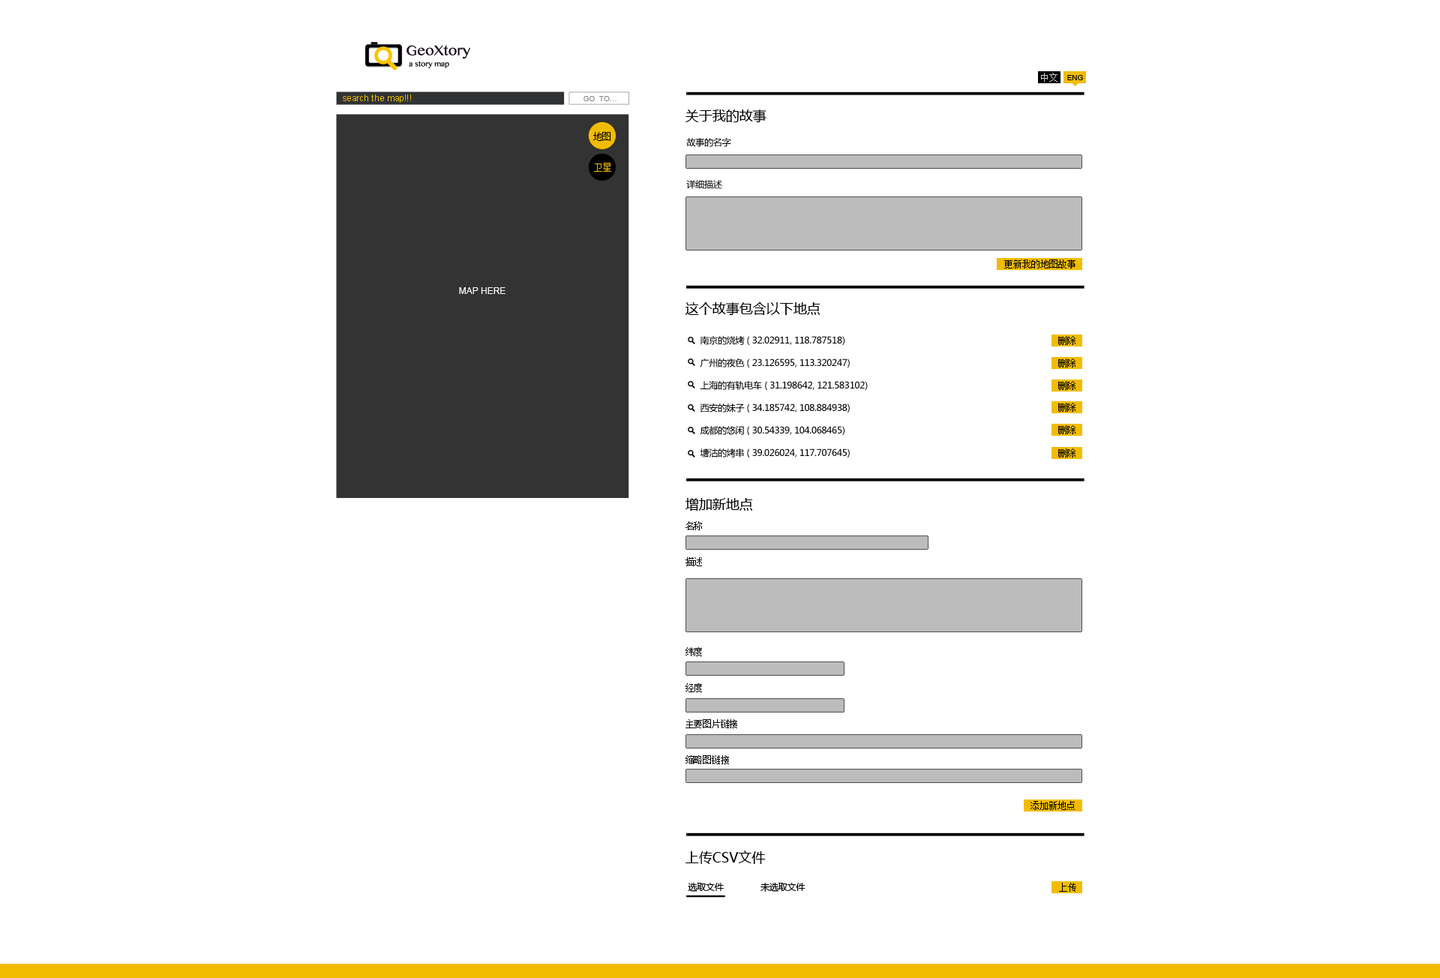
<style>
.page{position:relative;width:1440px;height:978px;background:#ffffff}
.page>*{position:absolute;margin:0}
.t1{font:19.9px "SinhalaMN";color:#190d1c}
.t2{font:10.3px "SinhalaMN";color:#190d1c}
.t3{font:9px "SimSun";color:#d0d0d0}
.t4{font:7.5px "ArialMT";color:#000000}
.t5{font:9px "ArialMT";color:#f2bc00}
.t6{font:7.5px "ArialMT";color:#8c868d;text-transform:uppercase}
.t7{font:13.5px "MicrosoftYaHei";color:#000000}
.t8{font:9px "SimSun";color:#000000}
.t9{font:9px/21px "MicrosoftYaHei";letter-spacing:-0.02em;color:#000000}
.t10{font:9px "SimSun";color:#f2bc00}
.t11{font:9px "ArialMT";color:#ffffff}
.t12{font:9px/22.5px "MicrosoftYaHei";letter-spacing:-0.02em;color:#000000}
.t13{font:9px/18px "SimSun";letter-spacing:-0.02em;color:#000000}
.t14{font:9px "MicrosoftYaHei";letter-spacing:-0.02em;color:#000000}
.t15{font:9px "SimSun";letter-spacing:-0.02em;color:#000000}
</style>
<div class="page">
<p class="t1" style="left:406px;top:45px;width:64px;height:14px">GeoXtory</p>
<p class="t2" style="left:409px;top:61px;width:40px;height:7px">a story map</p>
<p class="t3" style="left:1041px;top:73px;width:17px;height:9px">中文</p>
<p class="t4" style="left:1067px;top:75px;width:16px;height:5px">ENG</p>
<p class="t5" style="left:343px;top:94px;width:68px;height:9px">search the map!!!</p>
<p class="t6" style="left:584px;top:96px;width:32px;height:5px">GO  TO…</p>
<p class="t7" style="left:686px;top:110px;width:80px;height:13px">关于我的故事</p>
<p class="t8" style="left:593px;top:132px;width:17px;height:9px">地图</p>
<p class="t9" style="left:686px;top:137px;width:45px;height:52px">故事的名字<br><br>详细描述</p>
<p class="t10" style="left:594px;top:163px;width:17px;height:9px">卫星</p>
<p class="t8" style="left:1004px;top:260px;width:72px;height:8px">更新我的地图故事</p>
<p class="t11" style="left:459px;top:287px;width:47px;height:7px">MAP HERE</p>
<p class="t7" style="left:686px;top:302px;width:134px;height:14px">这个故事包含以下地点</p>
<p class="t12" style="left:700px;top:336px;width:168px;height:122px">南京的烧烤 ( 32.02911, 118.787518)<br>广州的夜色 ( 23.126595, 113.320247)   <br>上海的有轨电车 ( 31.198642, 121.583102)   <br>西安的妹子 ( 34.185742, 108.884938)   <br>成都的悠闲 ( 30.54339, 104.068465)   <br>塘沽的烤串 ( 39.026024, 117.707645)</p>
<p class="t8" style="left:1058px;top:336px;width:18px;height:9px">删除</p>
<p class="t8" style="left:1058px;top:358px;width:18px;height:10px">删除</p>
<p class="t8" style="left:1058px;top:381px;width:18px;height:9px">删除</p>
<p class="t8" style="left:1058px;top:403px;width:18px;height:9px">删除</p>
<p class="t8" style="left:1058px;top:425px;width:18px;height:9px">删除</p>
<p class="t8" style="left:1058px;top:448px;width:18px;height:10px">删除</p>
<p class="t7" style="left:686px;top:498px;width:67px;height:13px">增加新地点</p>
<p class="t13" style="left:686px;top:521px;width:51px;height:243px">名称<br><br>描述<br><br><br><br><br>纬度<br><br>经度<br><br>主要图片链接<br><br>缩略图链接</p>
<p class="t8" style="left:1030px;top:801px;width:45px;height:9px">添加新地点</p>
<p class="t7" style="left:686px;top:850px;width:80px;height:14px">上传CSV文件</p>
<p class="t14" style="left:688px;top:882px;width:118px;height:10px">选取文件               未选取文件</p>
<p class="t15" style="left:1059px;top:883px;width:17px;height:9px">上传</p>
</div>
